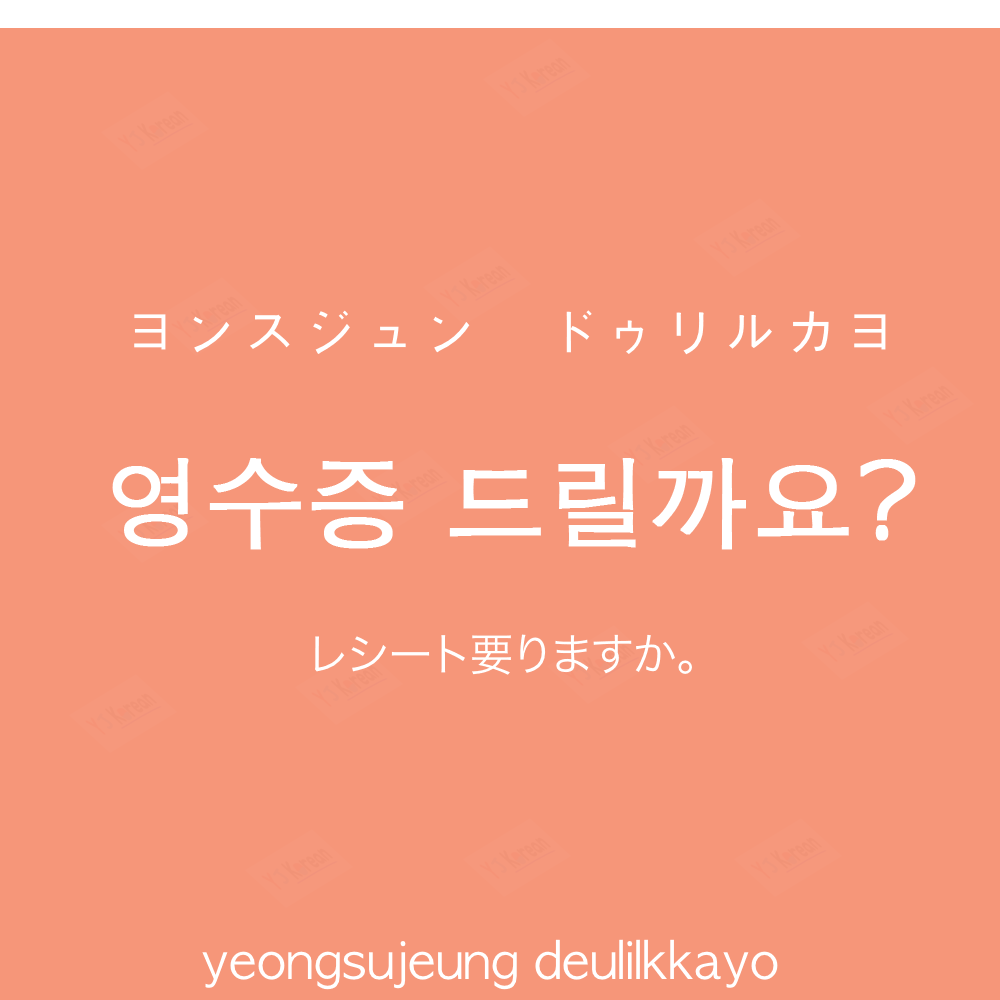
<style>
.page{position:relative;width:1000px;height:1000px;background:#f69679}
.page>*{position:absolute;margin:0}
.t1{font:60px "AppleGothic";color:#ffffff}
.t2{font:100px "AppleGothic";color:#ffffff;font-weight:bold}
.t3{font:45px "HiraKakuProN-W3";color:#ffffff}
.t4{font:50px "AppleGothic";color:#ffffff}
</style>
<div class="page">
<p class="t1" style="left:134px;top:310px;width:752px;height:45px">ヨンスジュン　ドゥリルカヨ</p>
<p class="t2" style="left:112px;top:458px;width:804px;height:92px">영수증 드릴까요?</p>
<p class="t3" style="left:315px;top:634px;width:377px;height:41px">レシート要りますか。</p>
<p class="t4" style="left:202px;top:939px;width:576px;height:51px">yeongsujeung deulilkkayo</p>
</div>
